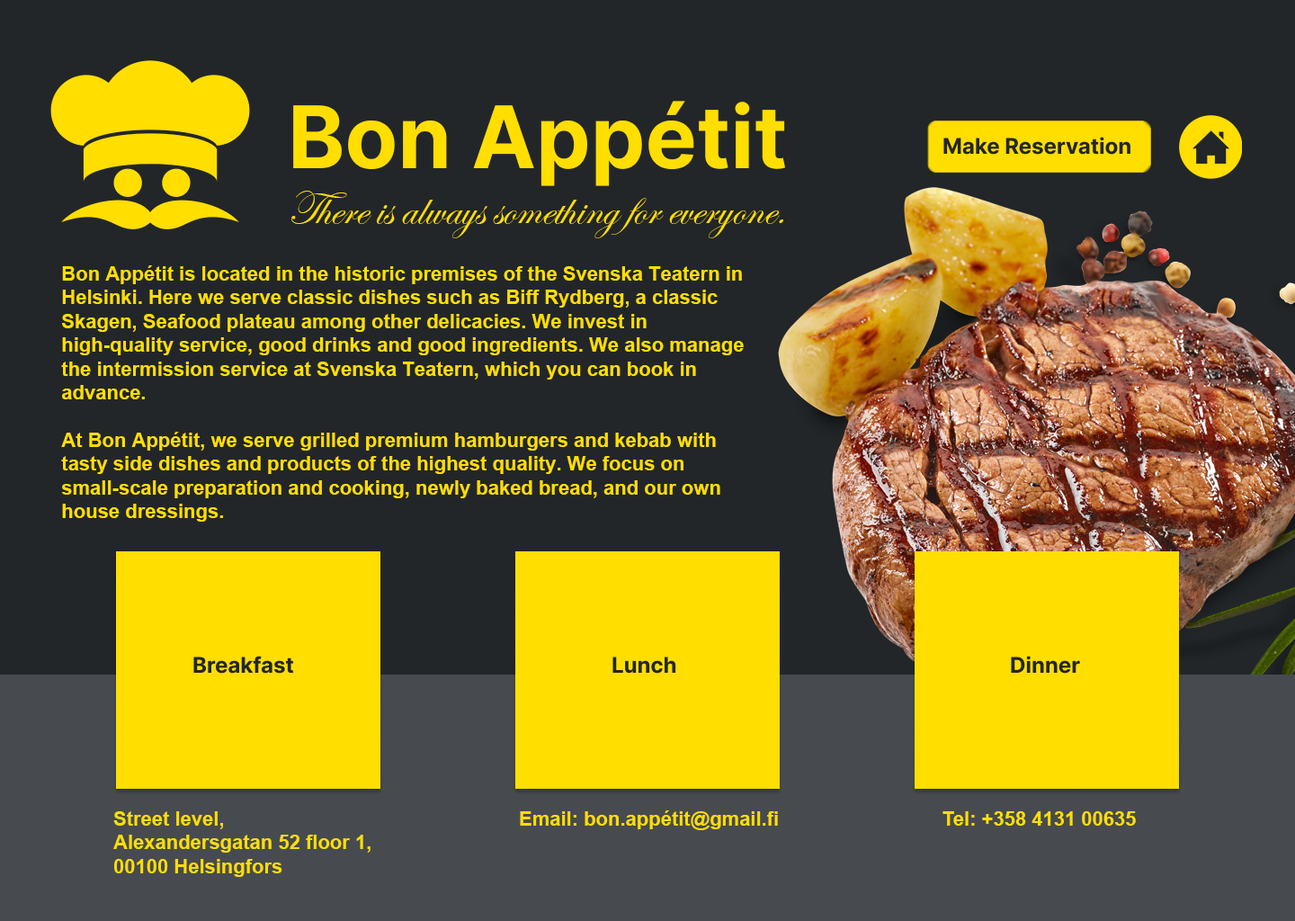
<style>
.page{position:relative;width:1295px;height:921px;background:#222629}
.page>*{position:absolute;margin:0}
.t1{font:47.2px "EdwardianScriptITC";color:#ffde00}
.t2{font:19.8px "Arial-BoldMT";color:#ffde00}
</style>
<div class="page">
<p class="t1" style="left:291px;top:191px;width:492px;height:47px">There is always something for everyone.</p>
<p class="t2" style="left:61px;top:265px;width:683px;height:257px">Bon Appétit is located in the historic premises of the Svenska Teatern in Helsinki. Here we serve classic dishes such as Biff Rydberg, a classic Skagen, Seafood plateau among other delicacies. We invest in high-quality service, good drinks and good ingredients. We also manage the intermission service at Svenska Teatern, which you can book in <br>advance.<br><br>At Bon Appétit, we serve grilled premium hamburgers and kebab with tasty side dishes and products of the highest quality. We focus on small-scale preparation and cooking, newly baked bread, and our own house dressings.</p>
<p class="t2" style="left:113px;top:811px;width:257px;height:66px">Street level,<br>Alexandersgatan 52 floor 1,<br>00100 Helsingfors</p>
<p class="t2" style="left:520px;top:810px;width:258px;height:20px">Email: bon.appétit@gmail.fi</p>
<p class="t2" style="left:942px;top:811px;width:194px;height:15px">Tel: +358 4131 00635</p>
</div>
